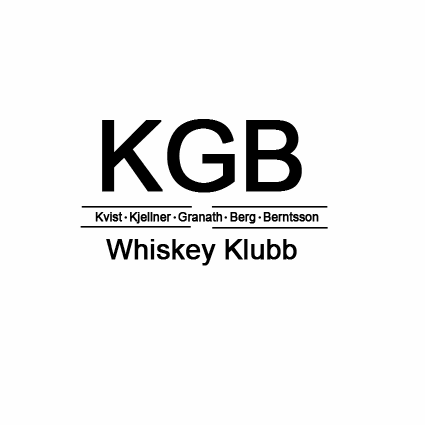
<style>
.page{position:relative;width:425px;height:425px;background:#fefefe}
.page>*{position:absolute;margin:0}
.t1{font:98px "ArialMT";letter-spacing:-0.01em;color:#000000;font-weight:bold}
.t2{font:12px "ArialMT";letter-spacing:-0.01em;color:#000000;font-weight:bold}
.t3{font:28px "ArialMT";letter-spacing:-0.01em;color:#000000;font-weight:bold}
</style>
<div class="page">
<p class="t1" style="left:102px;top:119px;width:200px;height:74px">KGB</p>
<p class="t2" style="left:95px;top:212px;width:224px;height:12px">Kvist  Kjellner  Granath  Berg  Berntsson</p>
<p class="t3" style="left:106px;top:239px;width:191px;height:27px">Whiskey Klubb</p>
</div>
